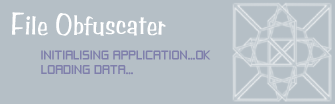
<style>
.page{position:relative;width:335px;height:104px;background:#b5bfc6}
.page>*{position:absolute;margin:0}
.t1{font:30px "BenguiatFriskyATT";color:#ffffff}
.t2{font:12px "ZeroThrees";color:#7f7fab}
</style>
<div class="page">
<p class="t1" style="left:12px;top:12px;width:154px;height:24px">File Obfuscater</p>
<p class="t2" style="left:41px;top:50px;width:170px;height:25px">INITIALISING APPLICATION...OK<br>LOADING DATA...</p>
</div>
